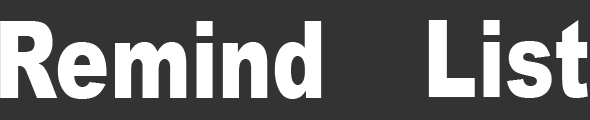
<style>
.page{position:relative;width:590px;height:120px;background:#333333}
.page>*{position:absolute;margin:0}
.t1{font:107.1px "Arial-Black";color:#ffffff;scale:0.76 1}
</style>
<div class="page">
<p class="t1" style="left:0px;top:21px;width:322px;height:78px">Remind</p>
<p class="t1" style="left:428px;top:20px;width:160px;height:78px">List</p>
</div>
